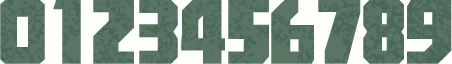
<style>
.page{position:relative;width:452px;height:64px;background:#5a7563}
.page>*{position:absolute;margin:0}
.t1{font:72px "MFJinHei_Noncommercial-Regular";letter-spacing:0.05em;color:#486657}
</style>
<div class="page">
<p class="t1" style="left:0px;top:0px;width:45px;height:64px">0</p>
<p class="t1" style="left:53px;top:0px;width:28px;height:64px">1</p>
<p class="t1" style="left:93px;top:0px;width:41px;height:64px">2</p>
<p class="t1" style="left:139px;top:0px;width:39px;height:64px">3</p>
<p class="t1" style="left:228px;top:0px;width:41px;height:64px">5</p>
<p class="t1" style="left:318px;top:0px;width:43px;height:64px">7</p>
</div>
